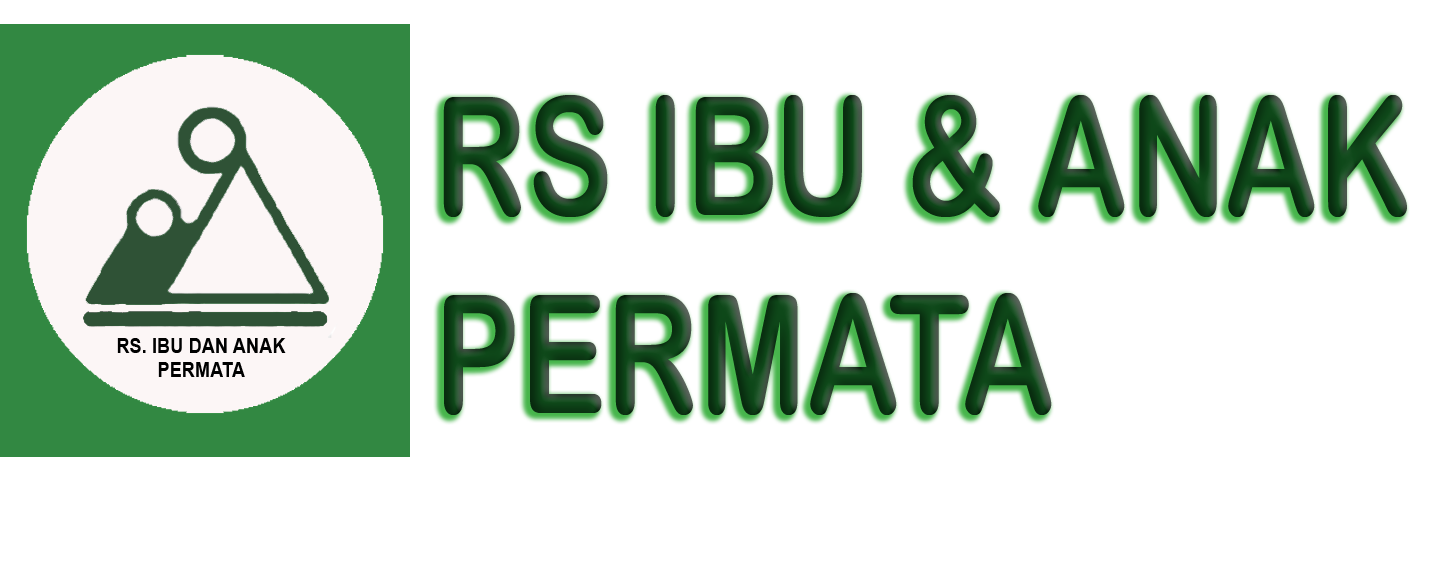
<style>
.page{position:relative;width:1440px;height:576px;background:#ffffff}
.page>*{position:absolute;margin:0}
.t1{font:164.6px "ArialRoundedMTBold";color:#0e4819;scale:0.79 1}
</style>
<div class="page">
<p class="t1" style="left:443px;top:95px;width:964px;height:320px">RS IBU &amp; ANAK<br>PERMATA</p>
</div>
